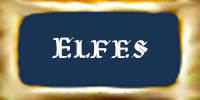
<style>
.page{position:relative;width:200px;height:100px;background:#1b3353}
.page>*{position:absolute;margin:0}
.t1{font:20.8px "WarsofAsgard";color:#ffffff}
</style>
<div class="page">
<p class="t1" style="left:52px;top:37px;width:96px;height:21px">Elfes</p>
</div>
